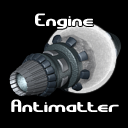
<style>
.page{position:relative;width:128px;height:128px;background:#000000}
.page>*{position:absolute;margin:0}
.t1{font:18px "GravitateBRK";color:#ffffff}
</style>
<div class="page">
<p class="t1" style="left:35px;top:13px;width:58px;height:16px">Engine</p>
<p class="t1" style="left:11px;top:99px;width:108px;height:13px">Antimatter</p>
</div>
